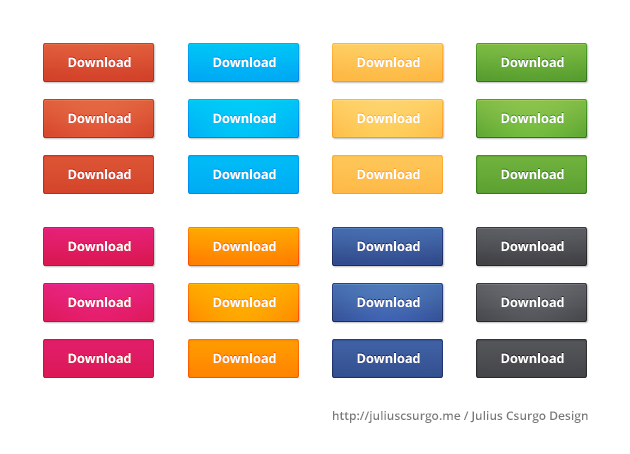
<style>
.page{position:relative;width:630px;height:454px;background:#ffffff}
.page>*{position:absolute;margin:0}
.t1{font:13px "OpenSans-Bold";color:#ffffff}
.t2{font:12px "OpenSans-Semibold";color:#787878}
</style>
<div class="page">
<p class="t1" style="left:68px;top:57px;width:63px;height:10px">Download</p>
<p class="t1" style="left:213px;top:57px;width:63px;height:10px">Download</p>
<p class="t1" style="left:357px;top:57px;width:63px;height:10px">Download</p>
<p class="t1" style="left:501px;top:57px;width:63px;height:10px">Download</p>
<p class="t1" style="left:68px;top:113px;width:63px;height:10px">Download</p>
<p class="t1" style="left:213px;top:113px;width:63px;height:10px">Download</p>
<p class="t1" style="left:357px;top:113px;width:63px;height:10px">Download</p>
<p class="t1" style="left:501px;top:113px;width:63px;height:10px">Download</p>
<p class="t1" style="left:68px;top:169px;width:63px;height:10px">Download</p>
<p class="t1" style="left:213px;top:169px;width:63px;height:10px">Download</p>
<p class="t1" style="left:357px;top:169px;width:63px;height:10px">Download</p>
<p class="t1" style="left:501px;top:169px;width:63px;height:10px">Download</p>
<p class="t1" style="left:68px;top:241px;width:63px;height:10px">Download</p>
<p class="t1" style="left:213px;top:241px;width:63px;height:10px">Download</p>
<p class="t1" style="left:357px;top:241px;width:63px;height:10px">Download</p>
<p class="t1" style="left:501px;top:241px;width:63px;height:10px">Download</p>
<p class="t1" style="left:68px;top:297px;width:63px;height:10px">Download</p>
<p class="t1" style="left:213px;top:297px;width:63px;height:10px">Download</p>
<p class="t1" style="left:357px;top:297px;width:63px;height:10px">Download</p>
<p class="t1" style="left:501px;top:297px;width:63px;height:10px">Download</p>
<p class="t1" style="left:68px;top:353px;width:63px;height:10px">Download</p>
<p class="t1" style="left:213px;top:353px;width:63px;height:10px">Download</p>
<p class="t1" style="left:357px;top:353px;width:63px;height:10px">Download</p>
<p class="t1" style="left:501px;top:353px;width:63px;height:10px">Download</p>
<p class="t2" style="left:333px;top:411px;width:255px;height:12px">http://juliuscsurgo.me / Julius Csurgo Design</p>
</div>
